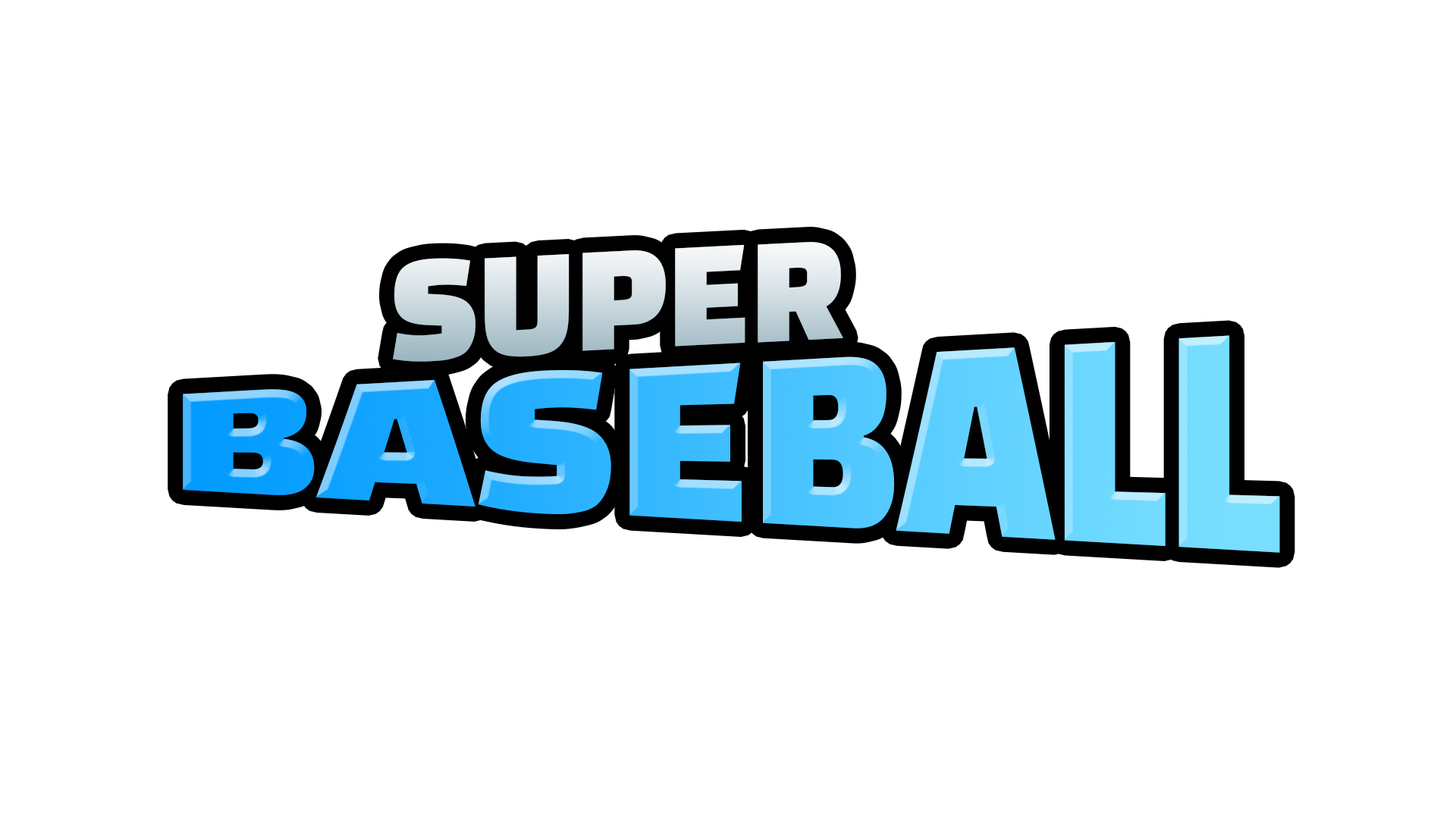
<style>
.page{position:relative;width:1456px;height:819px;background:#ffffff}
.page>*{position:absolute;margin:0}
.t1{font:156.3px "ChangaOne"}
.t2{font:251.3px "ChangaOne"}
</style>
<div class="page">
<p class="t1" style="left:393px;top:242px;width:450px;height:120px;rotate:-3deg">SUPER</p>
<p class="t2" style="left:183px;top:335px;width:1097px;height:218px">BASEBALL</p>
</div>
